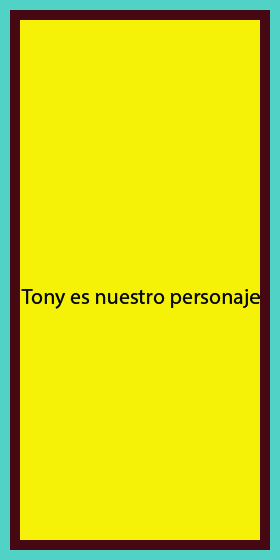
<style>
.page{position:relative;width:280px;height:560px;background:#f5f207}
.page>*{position:absolute;margin:0}
.t1{font:22px "MyriadPro-Regular";color:#060808}
</style>
<div class="page">
<p class="t1" style="left:21px;top:289px;width:239px;height:20px">Tony es nuestro personaje</p>
</div>
